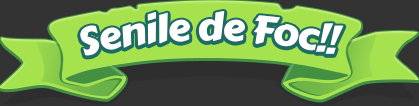
<style>
.page{position:relative;width:419px;height:106px;background:#333333}
.page>*{position:absolute;margin:0}
.t1{font:38px "CarterOne";letter-spacing:-0.02em;color:#ffffff}
</style>
<div class="page">
<p class="t1" style="left:80px;top:11px;width:264px;height:45px">Senile de Foc!!</p>
</div>
